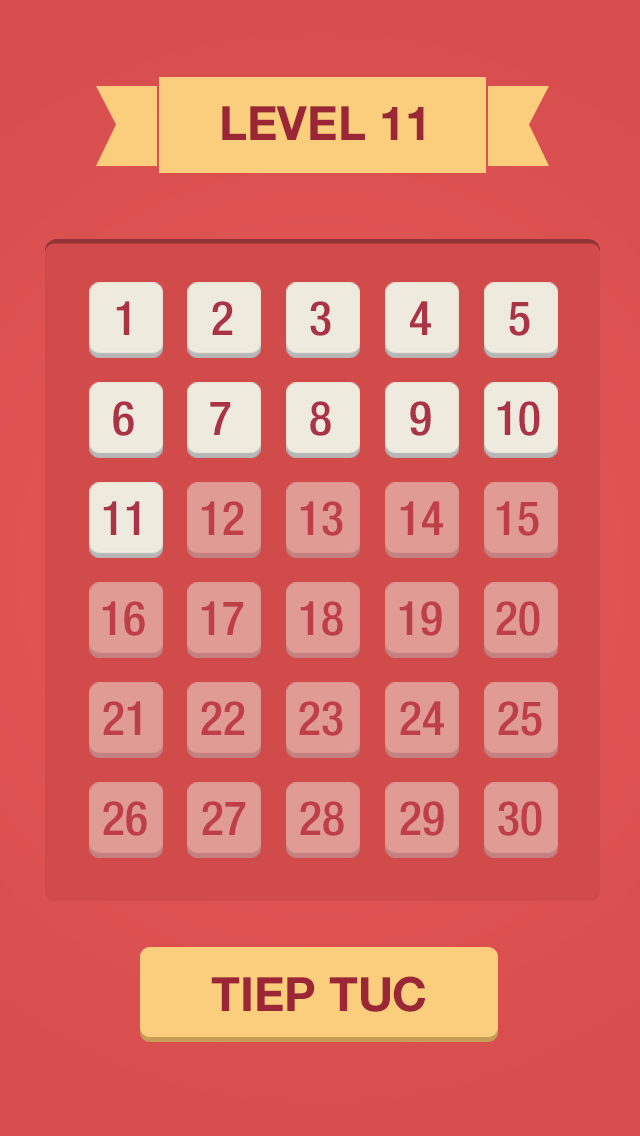
<style>
.page{position:relative;width:640px;height:1136px;background:#d24b4b}
.page>*{position:absolute;margin:0}
.t1{font:47.1px "HelveticaNeueLTStd-Bd";color:#9a2636}
.t2{font:47.5px "HelveticaNeueLTStd-MdCn";color:#ab3346}
.t3{font:47.5px "HelveticaNeueLTStd-MdCn";color:#c84949}
.t4{font:47.2px "HelveticaNeueLTStd-Bd";color:#9a2636}
</style>
<div class="page">
<p class="t1" style="left:222px;top:106px;width:202px;height:34px">LEVEL 11</p>
<p class="t2" style="left:116px;top:301px;width:14px;height:34px">1</p>
<p class="t2" style="left:212px;top:301px;width:21px;height:34px">2</p>
<p class="t2" style="left:310px;top:301px;width:21px;height:35px">3</p>
<p class="t2" style="left:410px;top:301px;width:21px;height:34px">4</p>
<p class="t2" style="left:509px;top:302px;width:21px;height:34px">5</p>
<p class="t2" style="left:113px;top:401px;width:21px;height:35px">6</p>
<p class="t2" style="left:310px;top:401px;width:21px;height:35px">8</p>
<p class="t2" style="left:410px;top:401px;width:21px;height:35px">9</p>
<p class="t2" style="left:497px;top:401px;width:43px;height:35px">10</p>
<p class="t2" style="left:210px;top:402px;width:21px;height:33px">7</p>
<p class="t2" style="left:103px;top:501px;width:37px;height:34px">11</p>
<p class="t3" style="left:201px;top:501px;width:43px;height:34px">12</p>
<p class="t3" style="left:300px;top:501px;width:43px;height:35px">13</p>
<p class="t3" style="left:400px;top:501px;width:43px;height:34px">14</p>
<p class="t3" style="left:496px;top:501px;width:43px;height:35px">15</p>
<p class="t3" style="left:102px;top:601px;width:43px;height:35px">16</p>
<p class="t3" style="left:201px;top:601px;width:43px;height:34px">17</p>
<p class="t3" style="left:300px;top:601px;width:43px;height:35px">18</p>
<p class="t3" style="left:399px;top:601px;width:43px;height:35px">19</p>
<p class="t3" style="left:496px;top:601px;width:44px;height:35px">20</p>
<p class="t3" style="left:103px;top:701px;width:38px;height:34px">21</p>
<p class="t3" style="left:201px;top:701px;width:44px;height:34px">22</p>
<p class="t3" style="left:299px;top:701px;width:44px;height:35px">23</p>
<p class="t3" style="left:400px;top:701px;width:44px;height:34px">24</p>
<p class="t3" style="left:498px;top:701px;width:44px;height:35px">25</p>
<p class="t3" style="left:103px;top:801px;width:44px;height:35px">26</p>
<p class="t3" style="left:202px;top:801px;width:44px;height:34px">27</p>
<p class="t3" style="left:300px;top:801px;width:44px;height:35px">28</p>
<p class="t3" style="left:400px;top:801px;width:44px;height:35px">29</p>
<p class="t3" style="left:498px;top:801px;width:44px;height:35px">30</p>
<p class="t4" style="left:211px;top:976px;width:215px;height:36px">TIEP TUC</p>
</div>
